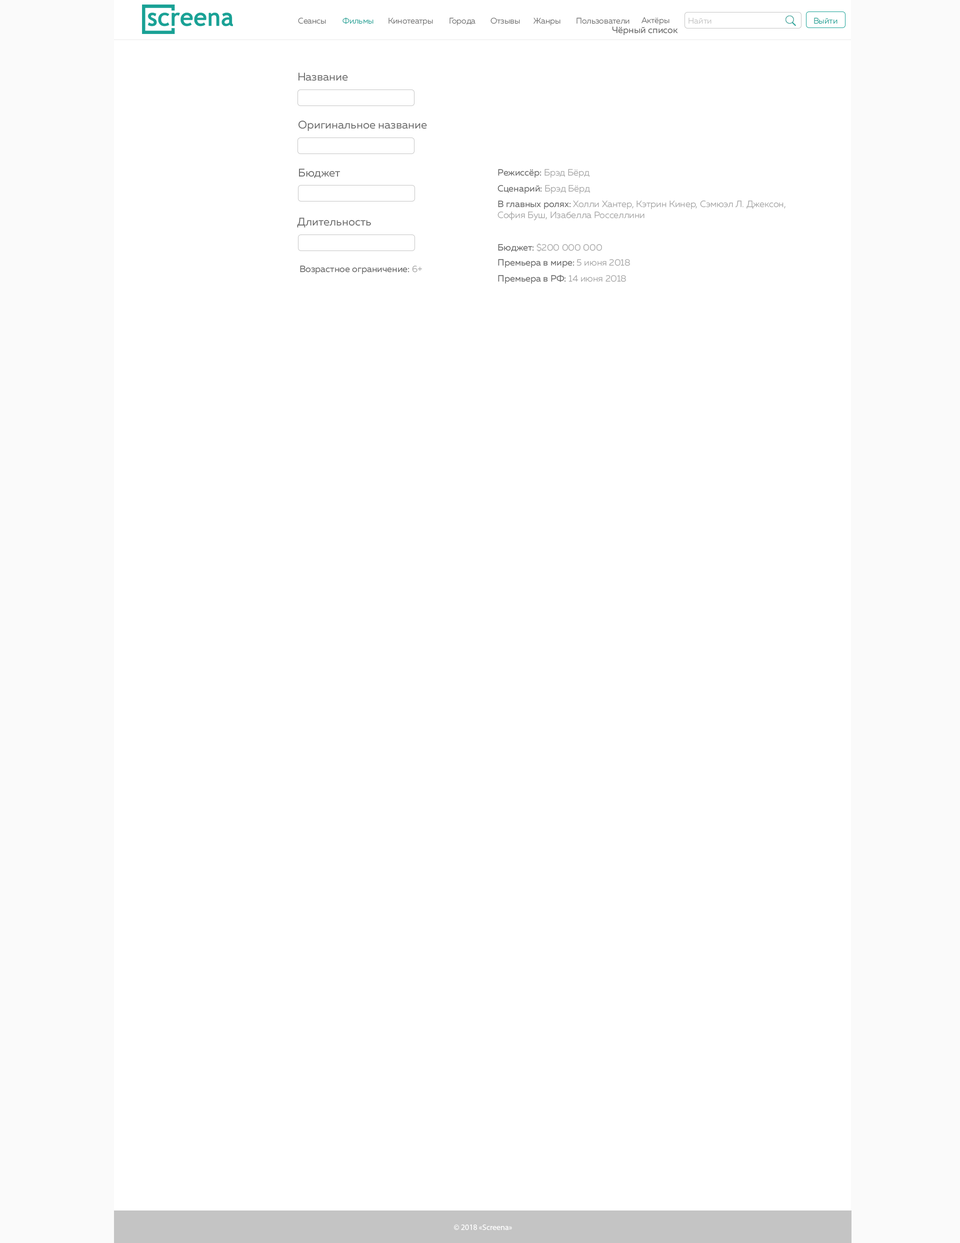
<style>
.page{position:relative;width:960px;height:1243px;background:#ffffff}
.page>*{position:absolute;margin:0}
.t1{font:8px "MullerLight";color:#696969}
.t2{font:8px "MullerLight";color:#1aa195}
.t3{font:8px "MullerLight";color:#c4c4c4}
.t4{font:8px "MullerLight";color:#19a195}
.t5{font:9px "MullerRegular";color:#696969}
.t6{font:11px "MullerRegular";color:#696969}
.t7{font:9px "MullerLight";color:#a3a3a3}
.t8{font:8px "MyriadPro-Regular";color:#ffffff}
</style>
<div class="page">
<p class="t1" style="left:298px;top:18px;width:28px;height:6px">Сеансы</p>
<p class="t2" style="left:342px;top:18px;width:32px;height:6px">Фильмы</p>
<p class="t1" style="left:388px;top:18px;width:45px;height:8px">Кинотеатры</p>
<p class="t1" style="left:450px;top:18px;width:26px;height:8px">Города</p>
<p class="t1" style="left:490px;top:18px;width:30px;height:6px">Отзывы</p>
<p class="t1" style="left:534px;top:18px;width:26px;height:8px">Жанры</p>
<p class="t1" style="left:576px;top:18px;width:54px;height:6px">Пользователи</p>
<p class="t1" style="left:642px;top:17px;width:28px;height:8px">Актёры</p>
<p class="t3" style="left:688px;top:18px;width:24px;height:6px">Найти</p>
<p class="t4" style="left:814px;top:18px;width:24px;height:6px">Выйти</p>
<p class="t5" style="left:612px;top:26px;width:66px;height:10px">Чёрный список</p>
<p class="t6" style="left:298px;top:72px;width:50px;height:9px">Название</p>
<p class="t6" style="left:298px;top:120px;width:129px;height:11px">Оригинальное название</p>
<p class="t6" style="left:299px;top:168px;width:41px;height:10px">Бюджет</p>
<p class="t5" style="left:498px;top:169px;width:92px;height:9px">Режиссёр:<span class="t7"> Брэд Бёрд</span></p>
<p class="t5" style="left:498px;top:185px;width:92px;height:9px">Сценарий:<span class="t7"> Брэд Бёрд</span></p>
<p class="t7" style="left:498px;top:200px;width:288px;height:20px"><span class="t5">В главных ролях: </span>Холли Хантер, Кэтрин Кинер, Сэмюэл Л. Джексон, <br>София Буш, Изабелла Росселлини</p>
<p class="t6" style="left:297px;top:218px;width:74px;height:10px">Длительность</p>
<p class="t7" style="left:498px;top:243px;width:104px;height:9px"><span class="t5">Бюджет:</span> $200 000 000</p>
<p class="t5" style="left:300px;top:266px;width:122px;height:8px">Возрастное ограничение: <span class="t7">6+</span></p>
<p class="t5" style="left:498px;top:259px;width:132px;height:9px">Премьера в мире:<span class="t7"> 5 июня 2018</span></p>
<p class="t5" style="left:498px;top:274px;width:128px;height:10px">Премьера в РФ:<span class="t7"> 14 июня 2018</span></p>
<p class="t8" style="left:454px;top:1224px;width:58px;height:6px">© 2018 «Screena»</p>
</div>
